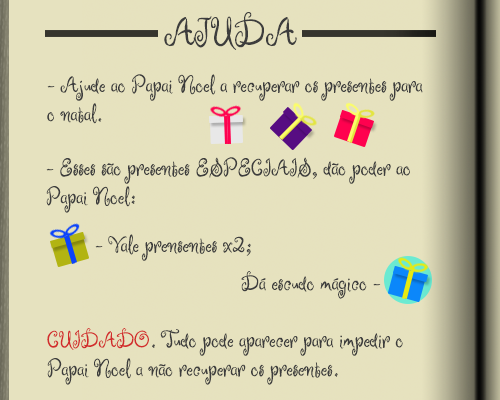
<style>
.page{position:relative;width:500px;height:400px;background:#e6e2be}
.page>*{position:absolute;margin:0}
.t1{font:42px "RugeBoogie-Regular";color:#3d3d3d}
.t2{font:24px "RugeBoogie-Regular";color:#3d3d3d}
.t3{font:24px "RugeBoogie-Regular";color:#d22c2c}
</style>
<div class="page">
<p class="t1" style="left:164px;top:12px;width:133px;height:38px">AJUDA</p>
<p class="t2" style="left:47px;top:74px;width:376px;height:50px">- Ajude ao Papai Noel a recuperar os presentes para<br>o natal.</p>
<p class="t2" style="left:46px;top:157px;width:364px;height:56px">- Esses são presentes ESPECIAIS, dão poder ao<br>Papai Noel:</p>
<p class="t2" style="left:95px;top:234px;width:156px;height:27px">- Vale prensentes x2;</p>
<p class="t2" style="left:241px;top:271px;width:140px;height:28px">Dá escudo mágico -</p>
<p class="t2" style="left:47px;top:328px;width:356px;height:57px"><span class="t3">CUIDADO</span>. Tudo pode aparecer para impedir o<br>Papai Noel a não recuperar os presentes.</p>
</div>
